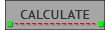
<style>
.page{position:relative;width:105px;height:30px;background:#a6a6a6}
.page>*{position:absolute;margin:0}
.t1{font:12px "PTSans-Caption";letter-spacing:0.05em;color:#313131}
</style>
<div class="page">
<p class="t1" style="left:20px;top:10px;width:70px;height:9px">CALCULATE</p>
</div>
